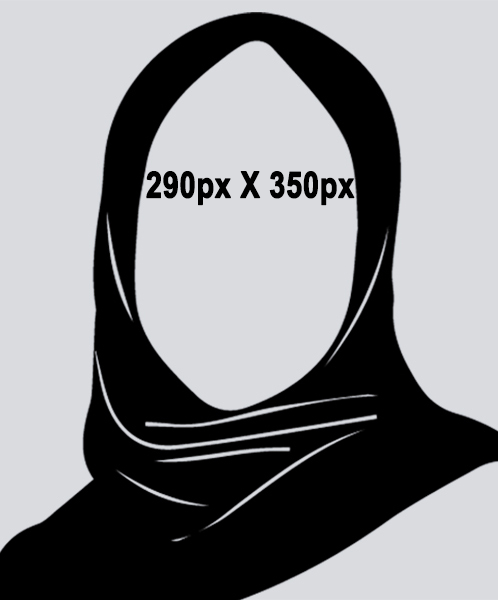
<style>
.page{position:relative;width:498px;height:600px;background:#dadbdf}
.page>*{position:absolute;margin:0}
.t1{font:36.1px "Arial-BoldMT";color:#000000;font-weight:bold;scale:0.8 1}
</style>
<div class="page">
<p class="t1" style="left:146px;top:171px;width:209px;height:35px">290px X 350px</p>
</div>
